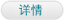
<style>
.page{position:relative;width:64px;height:20px}
.page>*{position:absolute;margin:0}
.t1{font:12px "STXihei";color:#088b9a}
</style>
<div class="page">
<p class="t1" style="left:19px;top:4px;width:24px;height:12px">详情</p>
</div>
